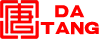
<style>
.page{position:relative;width:103px;height:39px;background:#ffffff}
.page>*{position:absolute;margin:0}
.t1{font:14px "JFangDie";color:#ff0000;scale:1.15 1}
</style>
<div class="page">
<p class="t1" style="left:40px;top:5px;width:59px;height:30px;text-align:center">DA<br>TANG</p>
</div>
